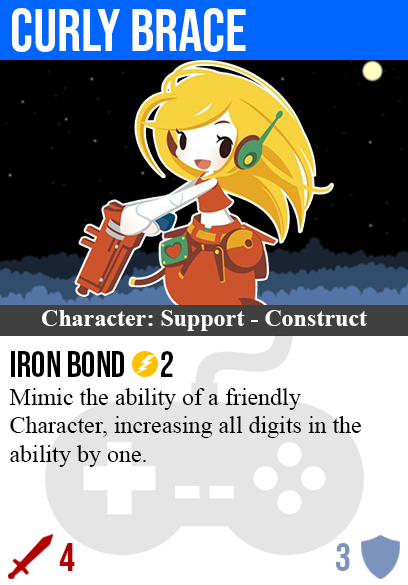
<style>
.page{position:relative;width:408px;height:585px;background:#ffffff}
.page>*{position:absolute;margin:0}
.t1{font:60px "BebasNeue-Regular";color:#ffffff}
.t2{font:24px "TimesNewRomanPS-BoldMT";color:#ffffff}
.t3{font:36px "BebasNeue-Regular";color:#000000}
.t4{font:24px "TimesNewRomanPSMT";color:#000000}
.t5{font:40px "BebasNeue-Regular";color:#af0202}
.t6{font:40px "BebasNeue-Regular";color:#7c94bd}
</style>
<div class="page">
<p class="t1" style="left:12px;top:8px;width:234px;height:44px">curly brace</p>
<p class="t2" style="left:42px;top:310px;width:325px;height:21px">Character: Support - Construct</p>
<p class="t3" style="left:11px;top:351px;width:162px;height:26px">iron bond      2</p>
<p class="t4" style="left:9px;top:388px;width:352px;height:79px">Mimic the ability of a friendly<br>Character, increasing all digits in the<br>ability by one.</p>
<p class="t5" style="left:59px;top:543px;width:16px;height:28px">4</p>
<p class="t6" style="left:336px;top:543px;width:14px;height:28px">3</p>
</div>
